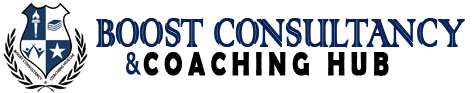
<style>
.page{position:relative;width:475px;height:93px;background:#ffffff}
.page>*{position:absolute;margin:0}
.t1{font:52.9px "ColonnaMT";letter-spacing:-0.02em;color:#062158;font-weight:bold;scale:0.7 1}
.t2{font:28.6px "MSReferenceSansSerif";letter-spacing:-0.02em;color:#062158;font-weight:bold;scale:0.7 1}
.t3{font:34.3px "BerlinSansFBDemi-Bold";letter-spacing:0.22em;color:#000000;font-weight:bold;scale:0.7 1}
</style>
<div class="page">
<p class="t1" style="left:96px;top:18px;width:369px;height:30px">BOOST CONSULTANCY</p>
<p class="t2" style="left:126px;top:52px;width:15px;height:23px">&amp;</p>
<p class="t3" style="left:143px;top:52px;width:246px;height:24px">COACHING HUB</p>
</div>
